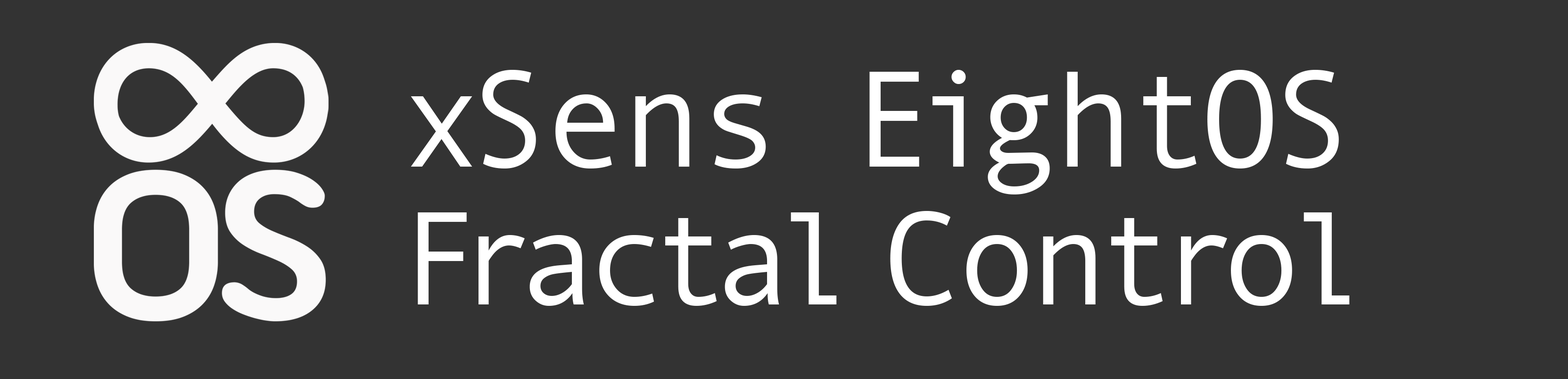
<style>
.page{position:relative;width:1568px;height:379px;background:#333333}
.page>*{position:absolute;margin:0}
.t1{font:133.6px/137.5px "AndaleMono";letter-spacing:-0.04em;color:#ffffff}
.t2{font:137.5px/137.5px "AndaleMono";letter-spacing:-0.04em;color:#ffffff}
</style>
<div class="page">
<p class="t1" style="left:411px;top:70px;width:939px;height:235px"><span class="t2">xSens EightOS<br></span>Fractal Control</p>
</div>
